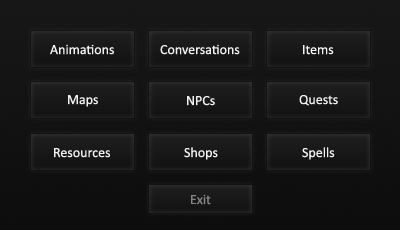
<style>
.page{position:relative;width:400px;height:230px}
.page>*{position:absolute;margin:0}
.t1{font:14px "Calibri";color:#f2f2f2}
.t2{font:14px "Calibri";color:#858585}
</style>
<div class="page">
<p class="t1" style="left:50px;top:44px;width:64px;height:11px">Animations</p>
<p class="t1" style="left:160px;top:44px;width:80px;height:11px">Conversations</p>
<p class="t1" style="left:303px;top:45px;width:31px;height:10px">Items</p>
<p class="t1" style="left:68px;top:95px;width:30px;height:12px">Maps</p>
<p class="t1" style="left:187px;top:96px;width:28px;height:10px">NPCs</p>
<p class="t1" style="left:299px;top:95px;width:39px;height:11px">Quests</p>
<p class="t1" style="left:54px;top:148px;width:57px;height:10px">Resources</p>
<p class="t1" style="left:184px;top:147px;width:34px;height:13px">Shops</p>
<p class="t1" style="left:302px;top:147px;width:33px;height:13px">Spells</p>
<p class="t2" style="left:191px;top:194px;width:20px;height:11px">Exit</p>
</div>
